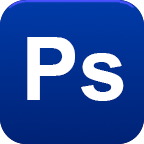
<style>
.page{position:relative;width:144px;height:144px}
.page>*{position:absolute;margin:0}
.t1{font:86.7px "Arial-BoldMT";color:#ffffff}
</style>
<div class="page">
<p class="t1" style="left:27px;top:37px;width:97px;height:64px">Ps</p>
</div>
